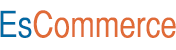
<style>
.page{position:relative;width:176px;height:50px;background:#ffffff}
.page>*{position:absolute;margin:0}
.t1{font:36px "HelveticaCYPlain";color:#e06b37}
.t2{font:36px "HelveticaCYPlain";color:#0069a3}
</style>
<div class="page">
<p class="t1" style="left:0px;top:10px;width:176px;height:28px"><span class="t2">Es</span>Commerce</p>
</div>
